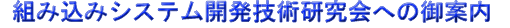
<style>
.page{position:relative;width:510px;height:28px;background:#ffffff}
.page>*{position:absolute;margin:0}
.t1{font:24px "MS-Gothic"}
</style>
<div class="page">
<p class="t1" style="left:13px;top:0px;width:477px;height:23px">組み込みシステム開発技術研究会への御案内</p>
</div>
